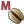
<style>
.page{position:relative;width:24px;height:24px;background:#ffffff}
.page>*{position:absolute;margin:0}
.t1{font:12px "MyriadPro-Semibold";color:#934543;font-weight:bold}
</style>
<div class="page">
<p class="t1" style="left:1px;top:1px;width:10px;height:10px">M</p>
</div>
